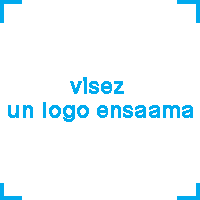
<style>
.page{position:relative;width:200px;height:200px;background:#ffffff}
.page>*{position:absolute;margin:0}
.t1{font:24px/24px "Olivier-Regular";letter-spacing:0.005em;color:#00aaee;font-weight:bold}
</style>
<div class="page">
<p class="t1" style="left:8px;top:77px;width:185px;height:45px;text-align:center">visez <br>un logo ensaama</p>
</div>
